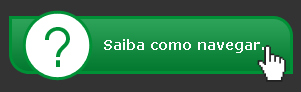
<style>
.page{position:relative;width:301px;height:92px;background:#333333}
.page>*{position:absolute;margin:0}
.t1{font:14px "Verdana-Bold";color:#ffffff}
</style>
<div class="page">
<p class="t1" style="left:104px;top:39px;width:160px;height:14px">Saiba como navegar.</p>
</div>
